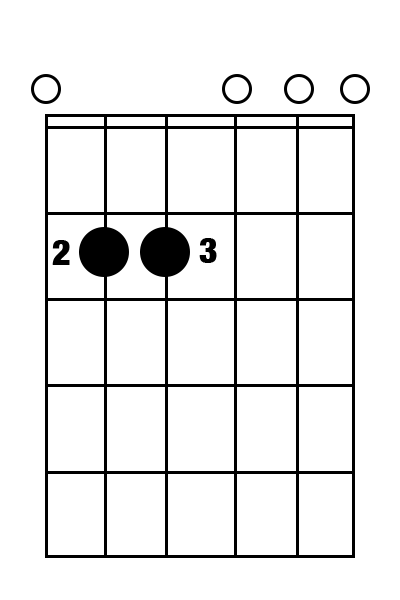
<style>
.page{position:relative;width:400px;height:600px;background:#ffffff}
.page>*{position:absolute;margin:0}
.t1{font:36px "HelveticaNeue-CondensedBlack";color:#000000}
</style>
<div class="page">
<p class="t1" style="left:52px;top:240px;width:18px;height:25px">2</p>
<p class="t1" style="left:199px;top:238px;width:18px;height:25px">3</p>
</div>
